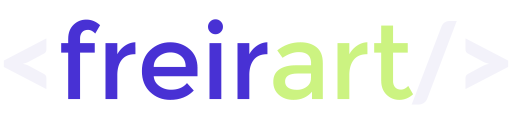
<style>
.page{position:relative;width:512px;height:128px;background:#ffffff}
.page>*{position:absolute;margin:0}
.t1{font:105px "Montserrat-Regular";letter-spacing:-0.01em;color:#4831d4}
.t2{font:105px "Lato-Black";letter-spacing:-0.01em;color:#f3f2fa}
.t3{font:105px "Montserrat-Regular";letter-spacing:-0.01em;color:#ccf381}
</style>
<div class="page">
<p class="t1" style="left:3px;top:19px;width:506px;height:86px"><span class="t2">&lt;</span>freir<span class="t3">art</span><span class="t2">/&gt;</span></p>
</div>
